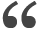
<style>
.page{position:relative;width:40px;height:32px;background:#ffffff}
.page>*{position:absolute;margin:0}
.t1{font:102px "Georgia";color:#444444}
</style>
<div class="page">
<p class="t1" style="left:2px;top:1px;width:35px;height:27px">“</p>
</div>
